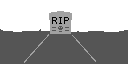
<style>
.page{position:relative;width:128px;height:64px;background:#555555}
.page>*{position:absolute;margin:0}
.t1{font:11.4px "Terminal";color:#000000}
</style>
<div class="page">
<p class="t1" style="left:52px;top:17px;width:17px;height:7px">RIP</p>
</div>
